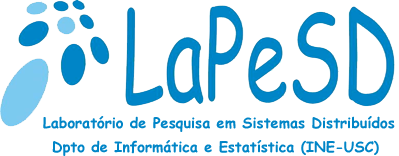
<style>
.page{position:relative;width:399px;height:156px;background:#ffffff}
.page>*{position:absolute;margin:0}
.t1{font:14.6px/23.1px "ComicSansMS-Bold";color:#0085c7}
</style>
<div class="page">
<p class="t1" style="left:43px;top:116px;width:352px;height:40px;text-align:center">Laboratório de Pesquisa em Sistemas Distribuídos<br>Dpto de Informática e Estatística (INE-USC)</p>
</div>
